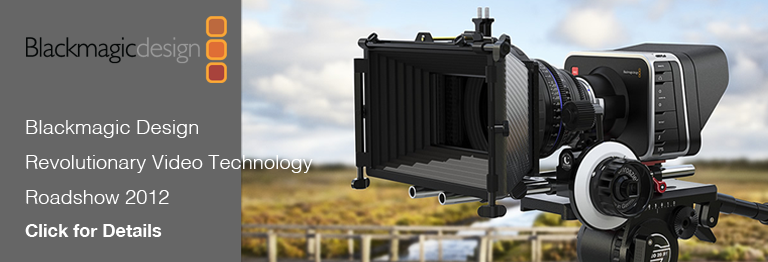
<style>
.page{position:relative;width:768px;height:262px;background:#666666}
.page>*{position:absolute;margin:0}
.t1{font:20px "Helvetica-Light";color:#ffffff}
.t2{font:18px "HelveticaNeue-Bold";color:#ffffff}
</style>
<div class="page">
<p class="t1" style="left:25px;top:120px;width:288px;height:117px">Blackmagic Design <br>Revolutionary Video Technology <br>Roadshow 2012<br><span class="t2">Click for Details</span></p>
</div>
